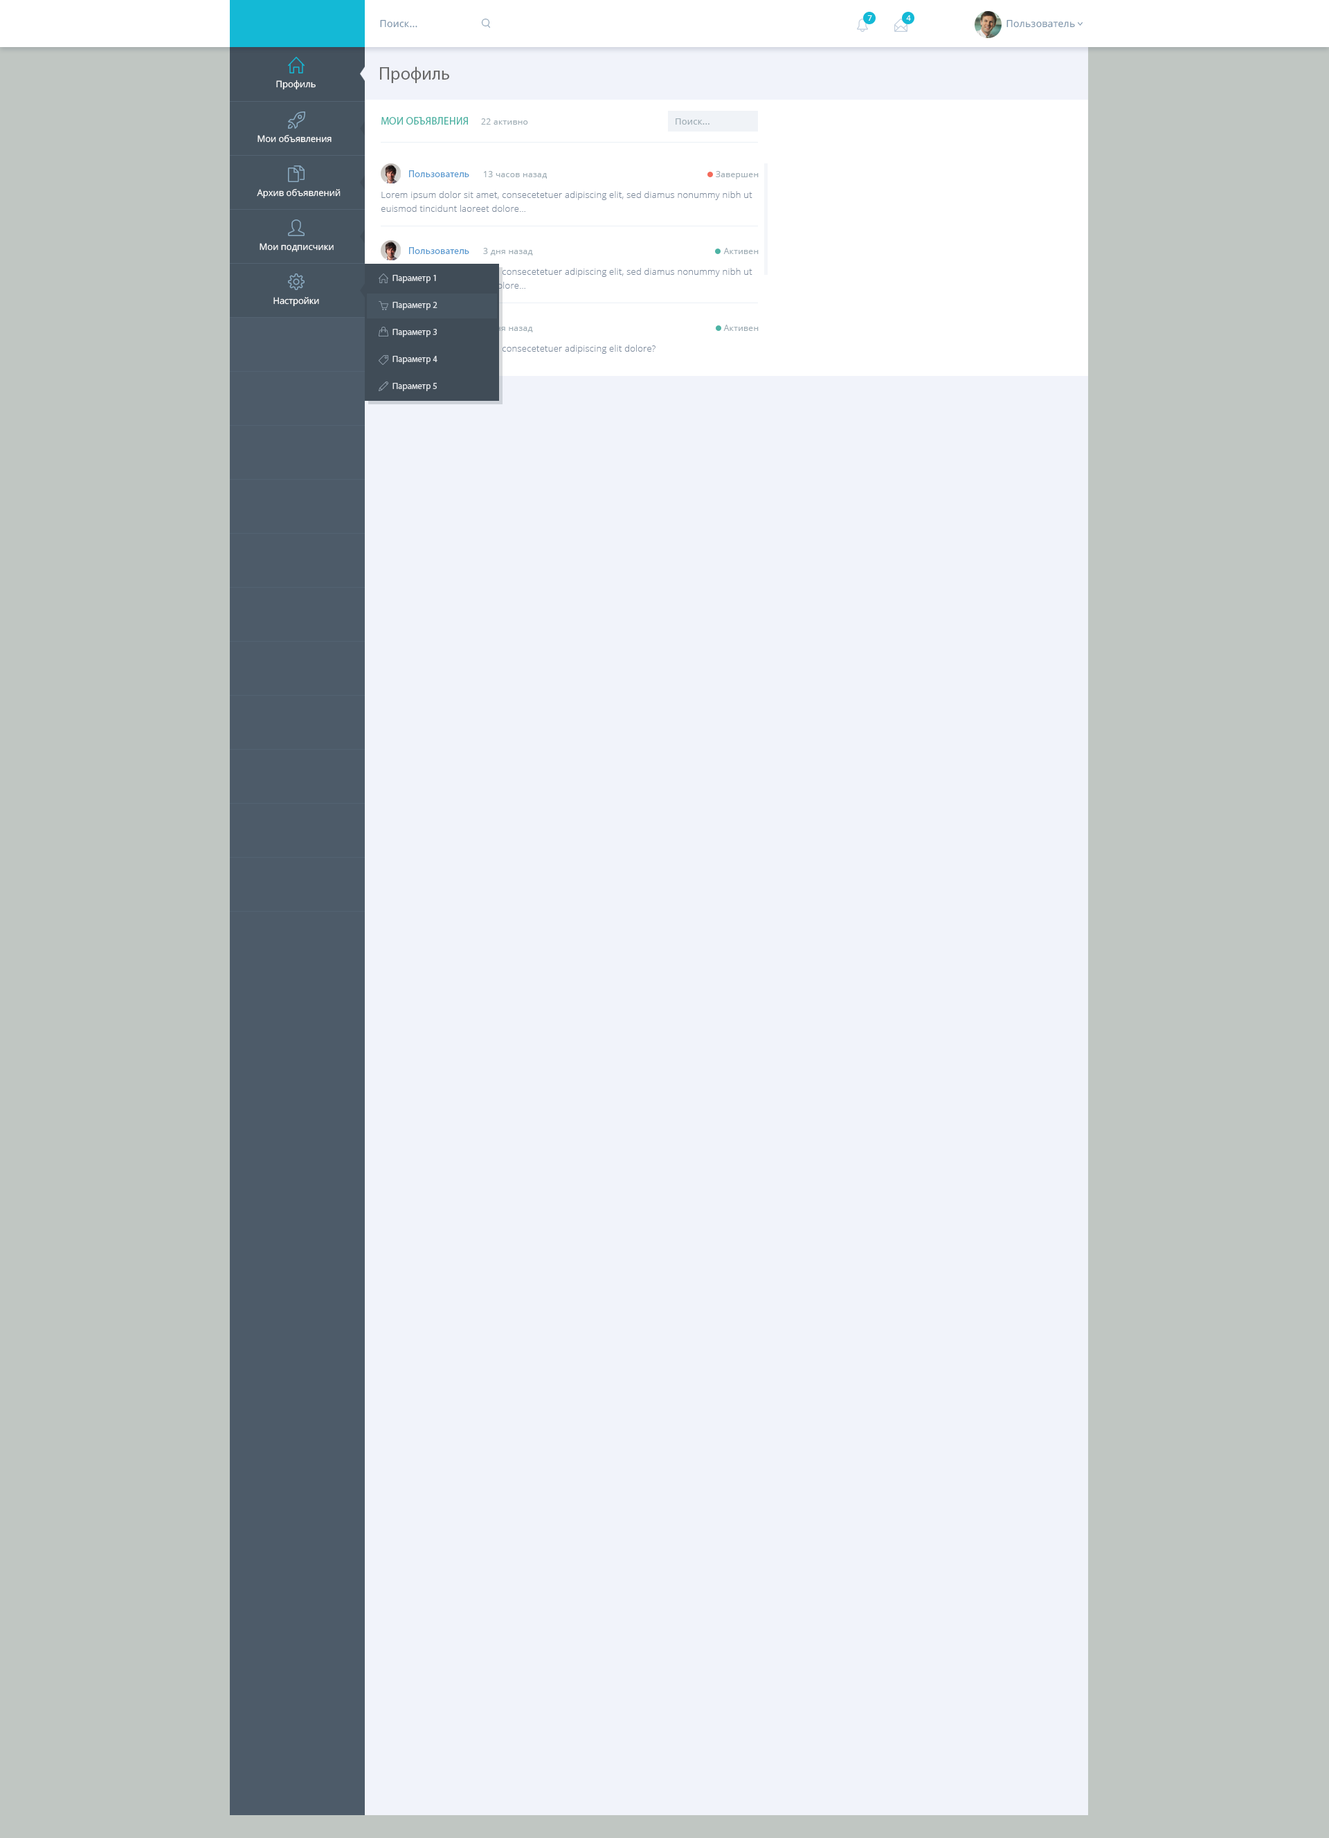
<style>
.page{position:relative;width:1329px;height:1838px;background:#f1f3fa}
.page>*{position:absolute;margin:0}
.t1{font:7.6px "OpenSans";letter-spacing:0.02em;color:#ffffff}
.t2{font:9.7px "OpenSans";letter-spacing:0.02em;color:#7c94aa}
.t3{font:18px "MyriadPro-Regular";color:#666666}
.t4{font:9px "OpenSans";color:#ffffff}
.t5{font:10.4px "MyriadPro-Regular";letter-spacing:0.02em;color:#4db3a4}
.t6{font:8.3px "OpenSans";letter-spacing:0.03em;color:#9eacb4}
.t7{font:9px "OpenSans";letter-spacing:0.02em;color:#9eacb4}
.t8{font:9px "OpenSans";letter-spacing:-0.005em;color:#ffffff}
.t9{font:9.7px "MyriadPro-Regular";letter-spacing:0.02em;color:#5b9bd1}
.t10{font:9px/13.8px "OpenSans-Light";letter-spacing:0.02em;color:#7e8c9e}
.t11{font:9px "MyriadPro-Regular";color:#e4e7eb}
.t12{font:9px "OpenSans";letter-spacing:-0.01em;color:#ffffff}
</style>
<div class="page">
<p class="t1" style="left:867px;top:15px;width:5px;height:6px">7</p>
<p class="t1" style="left:906px;top:15px;width:5px;height:6px">4</p>
<p class="t2" style="left:380px;top:19px;width:37px;height:9px">Поиск...</p>
<p class="t2" style="left:1007px;top:19px;width:68px;height:9px">Пользователь</p>
<p class="t3" style="left:380px;top:66px;width:69px;height:17px">Профиль</p>
<p class="t4" style="left:276px;top:80px;width:40px;height:10px">Профиль</p>
<p class="t5" style="left:381px;top:117px;width:87px;height:8px">МОИ ОБЪЯВЛЕНИЯ</p>
<p class="t6" style="left:481px;top:118px;width:47px;height:7px">22 активно</p>
<p class="t7" style="left:676px;top:118px;width:34px;height:7px">Поиск...</p>
<p class="t8" style="left:258px;top:134px;width:74px;height:9px">Мои объявления</p>
<p class="t9" style="left:409px;top:170px;width:60px;height:7px">Пользователь</p>
<p class="t6" style="left:484px;top:171px;width:63px;height:8px">13 часов назад</p>
<p class="t6" style="left:716px;top:171px;width:43px;height:8px">Завершен</p>
<p class="t4" style="left:257px;top:189px;width:84px;height:10px">Архив объявлений</p>
<p class="t10" style="left:381px;top:191px;width:372px;height:21px">Lorem ipsum dolor sit amet, consecetetuer adipiscing elit, sed diamus nonummy nibh ut euismod tincidunt laoreet dolore...</p>
<p class="t4" style="left:260px;top:243px;width:74px;height:9px">Мои подписчики</p>
<p class="t9" style="left:409px;top:247px;width:60px;height:7px">Пользователь</p>
<p class="t6" style="left:483px;top:248px;width:50px;height:7px">3 дня назад</p>
<p class="t6" style="left:723px;top:248px;width:36px;height:6px">Активен</p>
<p class="t11" style="left:393px;top:275px;width:43px;height:8px">Параметр 1</p>
<p class="t12" style="left:273px;top:297px;width:46px;height:10px">Настройки</p>
<p class="t11" style="left:393px;top:302px;width:45px;height:8px">Параметр 2</p>
<p class="t11" style="left:393px;top:329px;width:44px;height:8px">Параметр 3</p>
<p class="t6" style="left:723px;top:325px;width:36px;height:6px">Активен</p>
<p class="t11" style="left:393px;top:356px;width:45px;height:8px">Параметр 4</p>
<p class="t11" style="left:393px;top:383px;width:44px;height:8px">Параметр 5</p>
</div>
